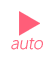
<style>
.page{position:relative;width:56px;height:62px;background:#ffffff}
.page>*{position:absolute;margin:0}
.t1{font:17.1px "SegoeUI-Light";color:#ff5e79;font-style:italic}
</style>
<div class="page">
<p class="t1" style="left:11px;top:37px;width:32px;height:13px">auto</p>
</div>
